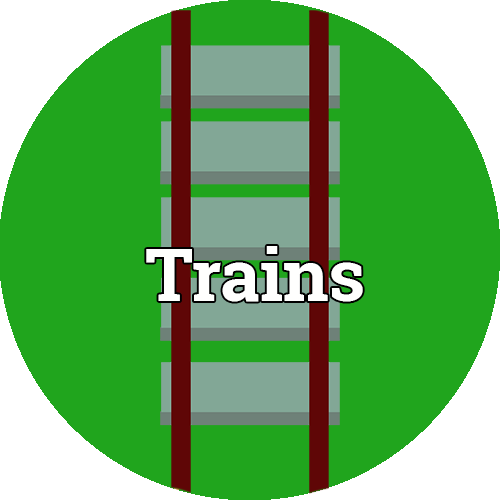
<style>
.page{position:relative;width:500px;height:500px;background:#20a51d}
.page>*{position:absolute;margin:0}
.t1{font:71.5px "RobotoSlab-Bold";color:#fffffe}
</style>
<div class="page">
<p class="t1" style="left:146px;top:246px;width:217px;height:56px">Trains</p>
</div>
